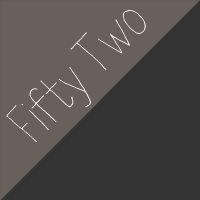
<style>
.page{position:relative;width:200px;height:200px;background:#333333}
.page>*{position:absolute;margin:0}
.t1{font:56.7px "lateron";color:#ffffff}
</style>
<div class="page">
<p class="t1" style="left:6px;top:9px;width:140px;height:133px;rotate:-46deg">Fifty Two</p>
</div>
